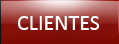
<style>
.page{position:relative;width:119px;height:44px}
.page>*{position:absolute;margin:0}
.t1{font:22px "Calibri";color:#ffffff}
</style>
<div class="page">
<p class="t1" style="left:17px;top:16px;width:83px;height:14px">CLIENTES</p>
</div>
